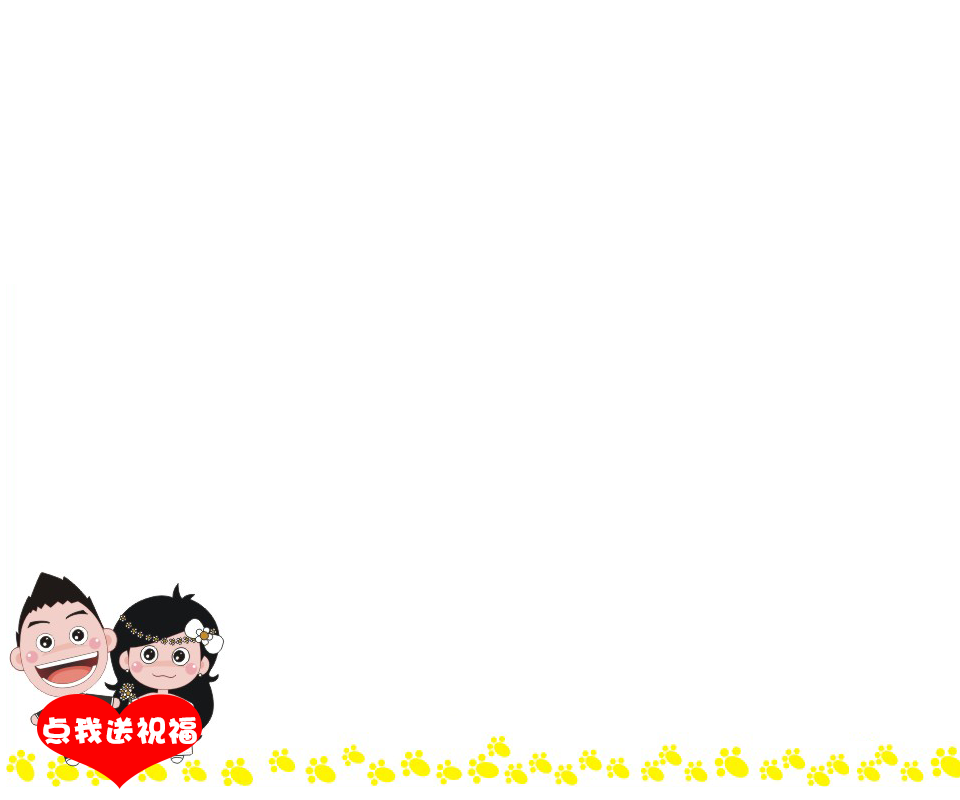
<style>
.page{position:relative;width:960px;height:800px;background:#ffffff}
.page>*{position:absolute;margin:0}
.t1{font:30px "DFPHaiBaoW12";letter-spacing:0.05em;color:#ffffff}
</style>
<div class="page">
<p class="t1" style="left:43px;top:717px;width:154px;height:28px">点我送祝福</p>
</div>
